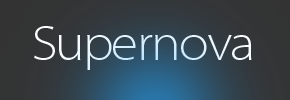
<style>
.page{position:relative;width:290px;height:100px}
.page>*{position:absolute;margin:0}
.t1{font:50px "MyriadPro-LightSemiExt";letter-spacing:-0.035em;color:#e7f5ff}
</style>
<div class="page">
<p class="t1" style="left:34px;top:26px;width:218px;height:44px">Supernova</p>
</div>
